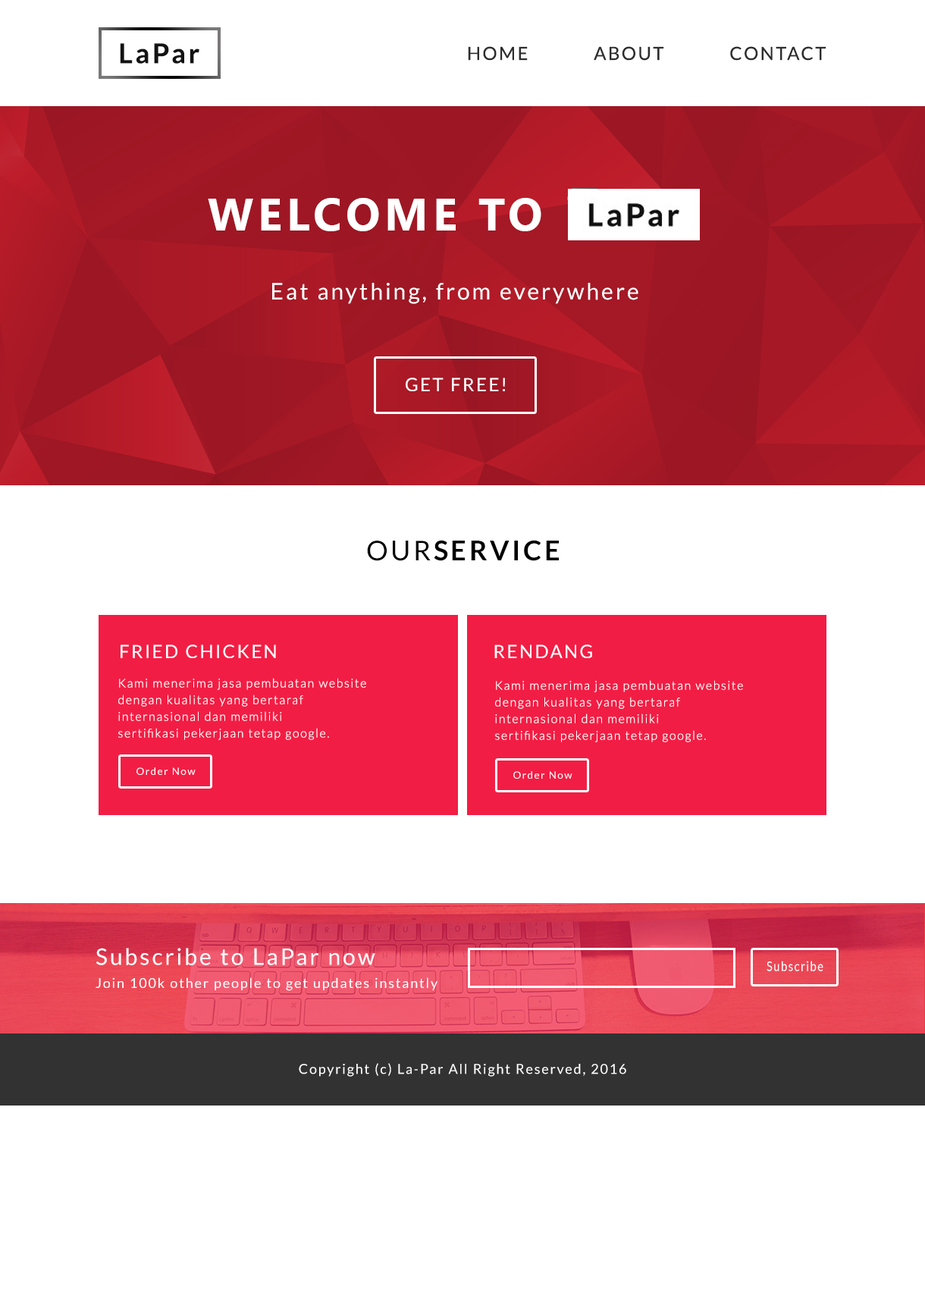
<style>
.page{position:relative;width:925px;height:1289px;background:#ffffff}
.page>*{position:absolute;margin:0}
.t1{font:27.3px "Lato-Bold";letter-spacing:0.1em;color:#131313}
.t2{font:18.2px "Lato-Regular";letter-spacing:0.1em;color:#2d2c2c}
.t3{font:45.5px "SegoeUI-Bold";letter-spacing:0.1em;color:#ffffff}
.t4{font:22.7px "Lato-Regular";letter-spacing:0.1em;color:#ffffff}
.t5{font:18.2px "Lato-Regular";letter-spacing:0.1em;color:#ffffff}
.t6{font:27.3px "Lato-Bold";letter-spacing:0.1em;color:#000000}
.t7{font:27.3px "Lato-Regular";letter-spacing:0.1em;color:#000000}
.t8{font:12.1px/16.7px "Lato-Light";letter-spacing:0.1em;color:#ffffff}
.t9{font:10.1px "Lato-Regular";letter-spacing:0.1em;color:#ffffff}
.t10{font:22.7px "Lato-Regular";letter-spacing:0.1em;color:#fffefe}
.t11{font:13.6px "Lato-Regular";letter-spacing:0.1em;color:#ffffff;scale:0.82 1}
.t12{font:13.6px "Lato-Regular";letter-spacing:0.1em;color:#fffefe}
.t13{font:13.6px "Lato-Regular";letter-spacing:0.1em;color:#ffffff}
</style>
<div class="page">
<p class="t1" style="left:120px;top:43px;width:79px;height:21px">LaPar</p>
<p class="t2" style="left:468px;top:46px;width:358px;height:15px">HOME            ABOUT            CONTACT</p>
<p class="t3" style="left:208px;top:198px;width:333px;height:33px">WELCOME TO</p>
<p class="t4" style="left:272px;top:283px;width:366px;height:21px">Eat anything, from everywhere</p>
<p class="t5" style="left:406px;top:378px;width:99px;height:13px">GET FREE!</p>
<p class="t6" style="left:367px;top:540px;width:192px;height:21px"><span class="t7">OUR</span>SERVICE</p>
<p class="t5" style="left:121px;top:645px;width:155px;height:13px">FRIED CHICKEN</p>
<p class="t5" style="left:494px;top:645px;width:98px;height:13px">RENDANG</p>
<p class="t8" style="left:118px;top:678px;width:248px;height:62px">Kami menerima jasa pembuatan website <br>dengan kualitas yang bertaraf <br>internasional dan memiliki<br>sertifikasi pekerjaan tetap google.</p>
<p class="t8" style="left:495px;top:680px;width:248px;height:62px">Kami menerima jasa pembuatan website <br>dengan kualitas yang bertaraf <br>internasional dan memiliki<br>sertifikasi pekerjaan tetap google.</p>
<p class="t9" style="left:136px;top:767px;width:60px;height:8px">Order Now</p>
<p class="t9" style="left:513px;top:771px;width:59px;height:8px">Order Now</p>
<p class="t10" style="left:96px;top:948px;width:279px;height:17px">Subscribe to LaPar now</p>
<p class="t11" style="left:767px;top:961px;width:56px;height:10px">Subscribe</p>
<p class="t12" style="left:96px;top:977px;width:342px;height:14px">Join 100k other people to get updates instantly</p>
<p class="t13" style="left:299px;top:1063px;width:327px;height:14px">Copyright (c) La-Par All Right Reserved, 2016</p>
</div>
